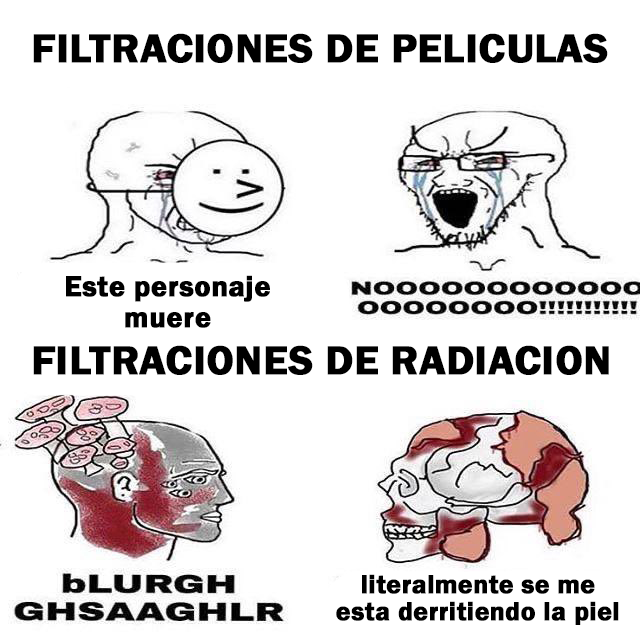
<style>
.page{position:relative;width:640px;height:640px;background:#ffffff}
.page>*{position:absolute;margin:0}
.t1{font:41.7px "FranklinGothic-Demi";color:#000000;font-weight:bold}
.t2{font:30px "FranklinGothic-Demi";color:#000000;font-weight:bold}
.t3{font:27px "FranklinGothic-Demi";color:#000000;font-weight:bold}
</style>
<div class="page">
<p class="t1" style="left:33px;top:33px;width:575px;height:30px">FILTRACIONES DE PELICULAS</p>
<p class="t2" style="left:66px;top:275px;width:204px;height:53px;text-align:center">Este personaje<br>muere</p>
<p class="t1" style="left:33px;top:345px;width:576px;height:30px">FILTRACIONES DE RADIACION</p>
<p class="t3" style="left:336px;top:574px;width:283px;height:51px;text-align:center">literalmente se me<br>esta derritiendo la piel</p>
</div>
